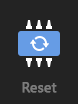
<style>
.page{position:relative;width:78px;height:104px;background:#232323}
.page>*{position:absolute;margin:0}
.t1{font:14px "SegoeUI";color:#7c7c7c;font-weight:bold}
</style>
<div class="page">
<p class="t1" style="left:22px;top:82px;width:35px;height:11px">Reset</p>
</div>
